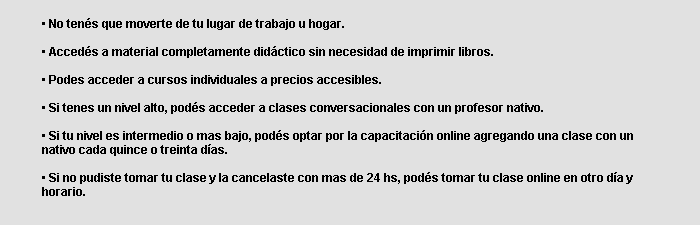
<style>
.page{position:relative;width:700px;height:225px;background:#e1e1e1}
.page>*{position:absolute;margin:0}
.t1{font:11.7px "Arial-BoldMT";color:#000000}
</style>
<div class="page">
<p class="t1" style="left:42px;top:18px;width:591px;height:178px">• No tenés que moverte de tu lugar de trabajo u hogar.<br><br>• Accedés a material completamente didáctico sin necesidad de imprimir libros.<br><br>• Podes acceder a cursos individuales a precios accesibles.<br><br>• Si tenes un nivel alto, podés acceder a clases conversacionales con un profesor nativo.<br><br>• Si tu nivel es intermedio o mas bajo, podés optar por la capacitación online agregando una clase con un nativo cada quince o treinta días.<br><br>• Si no pudiste tomar tu clase y la cancelaste con mas de 24 hs, podés tomar tu clase online en otro día y horario.</p>
</div>
